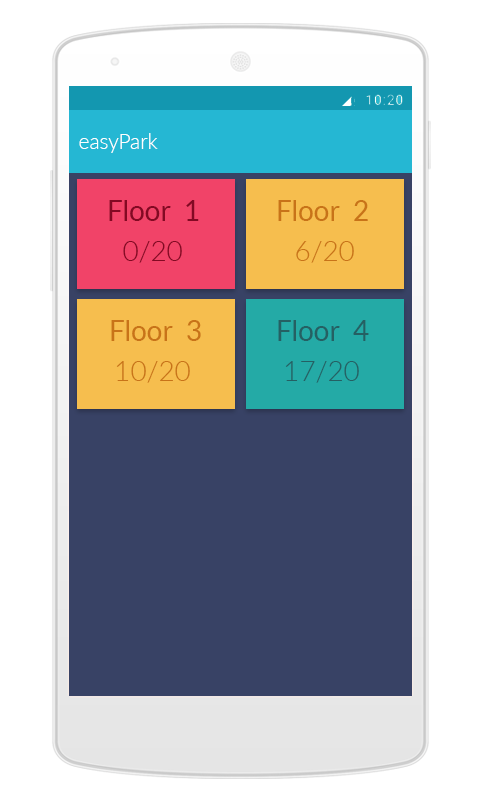
<style>
.page{position:relative;width:480px;height:800px;background:#ffffff}
.page>*{position:absolute;margin:0}
.t1{font:20.8px "Lato-Light";color:#ffffff}
.t2{font:27.8px "Lato-Regular";color:#830923}
.t3{font:27.8px "Lato-Regular";color:#c87318}
.t4{font:27.8px "Lato-Light";color:#830923}
.t5{font:27.8px "Lato-Light";color:#c87318}
.t6{font:27.8px "Lato-Regular";color:#256063}
.t7{font:27.8px "Lato-Light";color:#256063}
</style>
<div class="page">
<p class="t1" style="left:79px;top:133px;width:79px;height:20px">easyPark</p>
<p class="t2" style="left:109px;top:200px;width:90px;height:21px">Floor  1</p>
<p class="t3" style="left:278px;top:200px;width:90px;height:21px">Floor  2</p>
<p class="t4" style="left:123px;top:241px;width:59px;height:22px">0/20</p>
<p class="t5" style="left:296px;top:241px;width:58px;height:22px">6/20</p>
<p class="t3" style="left:111px;top:320px;width:90px;height:21px">Floor  3</p>
<p class="t6" style="left:278px;top:320px;width:91px;height:21px">Floor  4</p>
<p class="t5" style="left:116px;top:361px;width:74px;height:22px">10/20</p>
<p class="t7" style="left:285px;top:361px;width:74px;height:22px">17/20</p>
</div>
